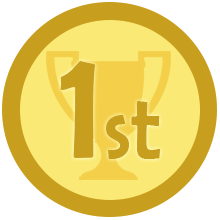
<style>
.page{position:relative;width:220px;height:220px;background:#fae975}
.page>*{position:absolute;margin:0}
.t1{font:90px "BerlinSansFB-Reg";color:#c89e1e}
.t2{font:160px "BerlinSansFB-Reg";color:#c89e1e}
</style>
<div class="page">
<p class="t1" style="left:60px;top:61px;width:100px;height:98px"><span class="t2">1</span>st</p>
</div>
